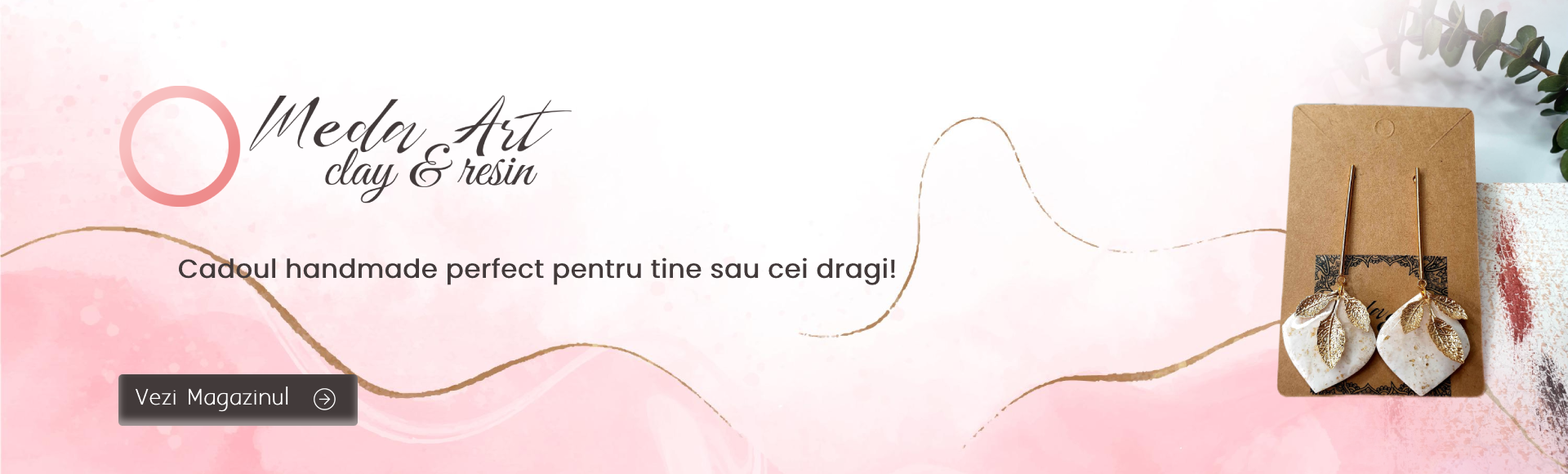
<style>
.page{position:relative;width:1568px;height:474px}
.page>*{position:absolute;margin:0}
.t1{font:26.1px "Poppins-Regular";color:#423a3a;font-weight:bold}
.t2{font:19.6px "AaarghNormal";color:#ffffff;font-weight:bold}
</style>
<div class="page">
<p class="t1" style="left:178px;top:257px;width:717px;height:28px">Cadoul handmade perfect pentru tine sau cei dragi!</p>
<p class="t2" style="left:135px;top:385px;width:153px;height:27px">Vezi Magazinul</p>
</div>
